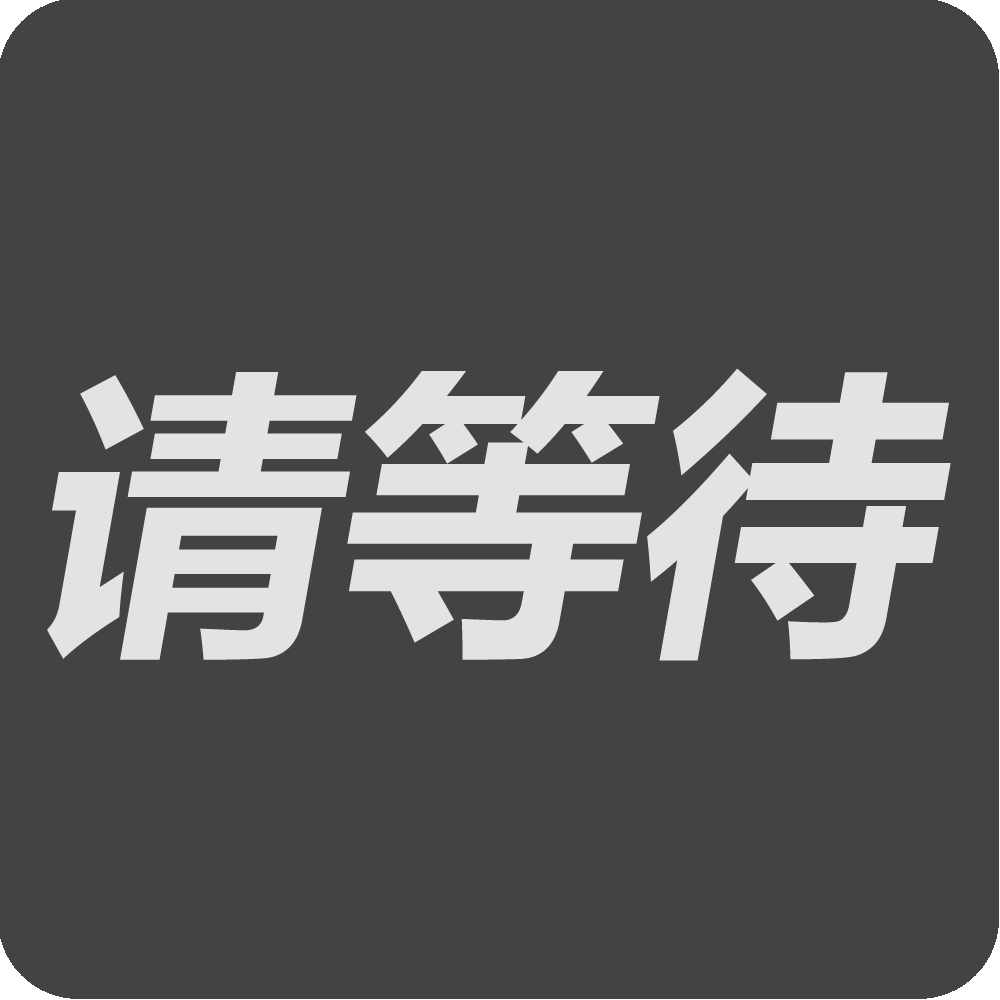
<style>
.page{position:relative;width:1000px;height:1000px;background:#434343}
.page>*{position:absolute;margin:0}
.t1{font:300px "MicrosoftYaHei-Bold";color:#e3e3e3;text-transform:uppercase;font-style:italic}
</style>
<div class="page">
<p class="t1" style="left:47px;top:368px;width:904px;height:293px">请等待</p>
</div>
